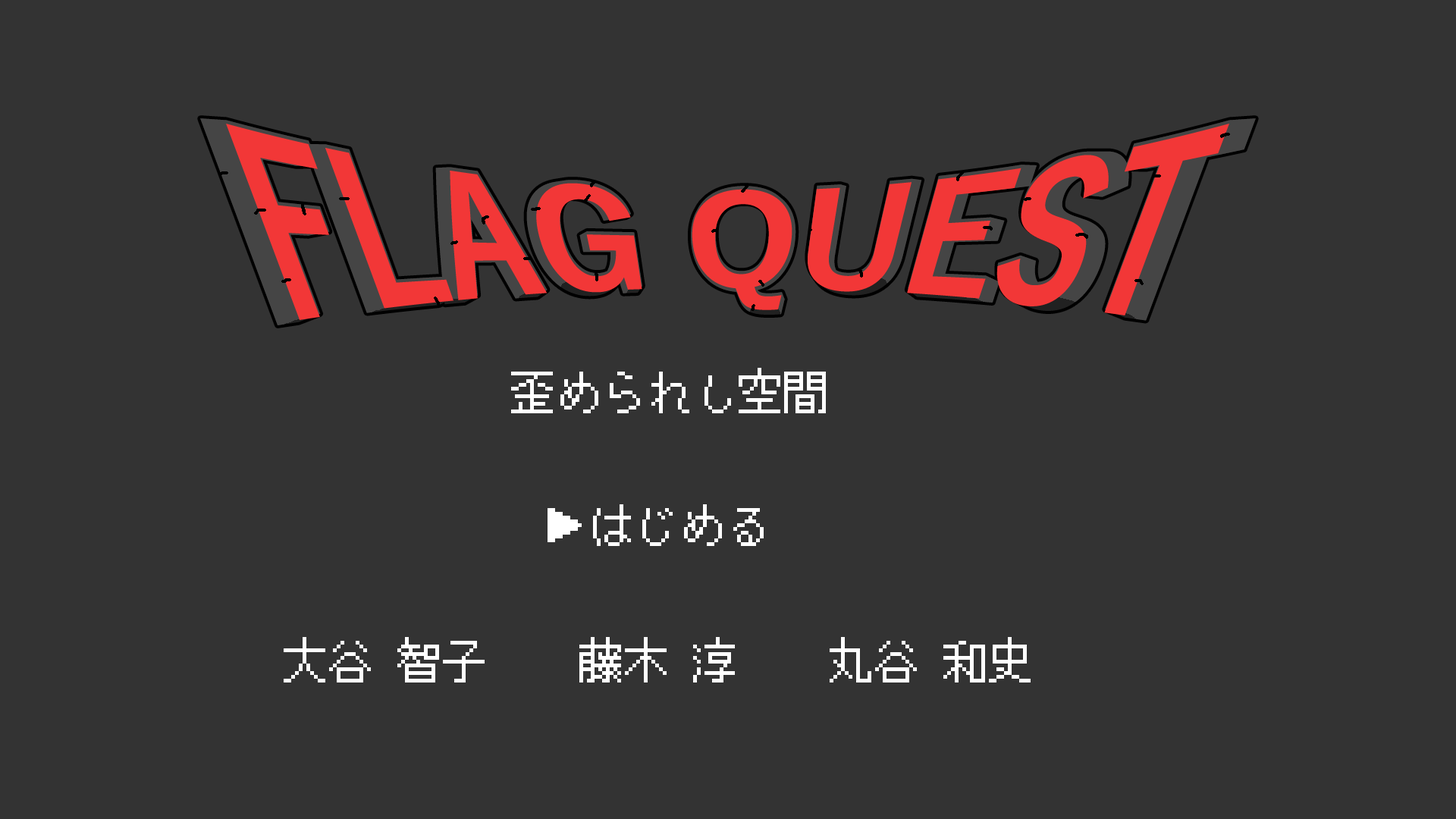
<style>
.page{position:relative;width:1456px;height:819px;background:#333333}
.page>*{position:absolute;margin:0}
.t1{font:45.5px "PixelMplus12-Regular";color:#ffffff}
</style>
<div class="page">
<p class="t1" style="left:511px;top:368px;width:315px;height:45px">歪められし空間</p>
<p class="t1" style="left:548px;top:504px;width:216px;height:42px">▶はじめる</p>
<p class="t1" style="left:284px;top:637px;width:747px;height:45px">大谷 智子　　藤木 淳　　丸谷 和史</p>
</div>
